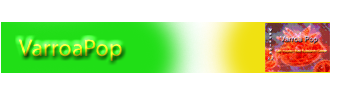
<style>
.page{position:relative;width:340px;height:100px;background:#ffffff}
.page>*{position:absolute;margin:0}
.t1{font:24px "MyriadPro-Regular"}
</style>
<div class="page">
<p class="t1" style="left:19px;top:39px;width:103px;height:22px">VarroaPop</p>
</div>
